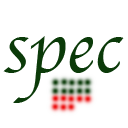
<style>
.page{position:relative;width:128px;height:128px;background:#ffffff}
.page>*{position:absolute;margin:0}
.t1{font:75px "Apple-Chancery";color:#0b3a09}
</style>
<div class="page">
<p class="t1" style="left:3px;top:36px;width:121px;height:67px">spec</p>
</div>
